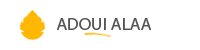
<style>
.page{position:relative;width:200px;height:50px;background:#ffffff}
.page>*{position:absolute;margin:0}
.t1{font:17.8px "MyriadPro-Regular";color:#555555}
</style>
<div class="page">
<p class="t1" style="left:56px;top:18px;width:96px;height:12px">ADOUI ALAA</p>
</div>
